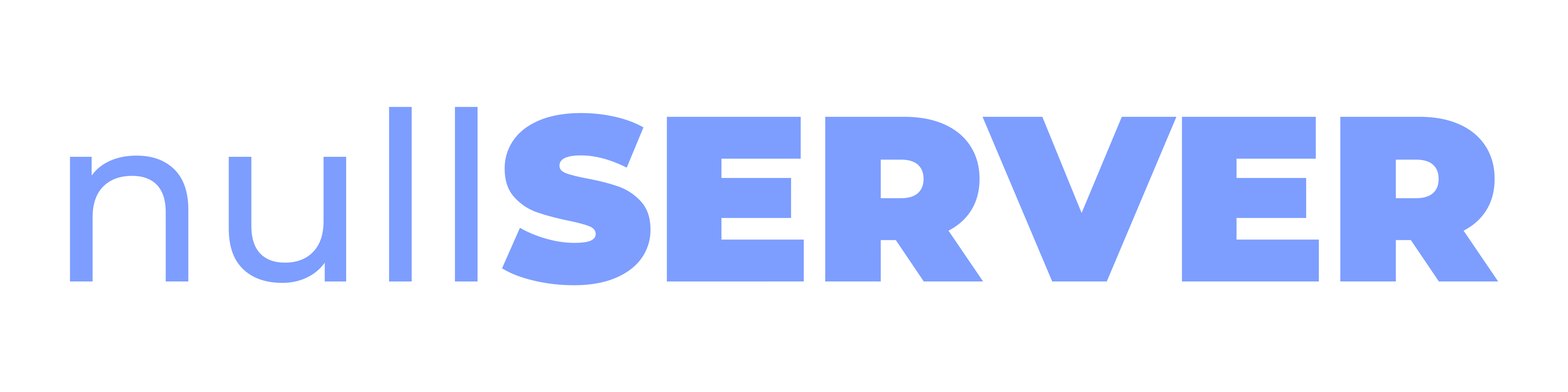
<style>
.page{position:relative;width:1568px;height:392px;background:#ffffff}
.page>*{position:absolute;margin:0}
.t1{font:235.2px "Montserrat-Black";color:#7d9eff}
.t2{font:235.2px "Montserrat-Medium";color:#7d9eff}
</style>
<div class="page">
<p class="t1" style="left:70px;top:107px;width:1428px;height:178px"><span class="t2">null</span>SERVER</p>
</div>
